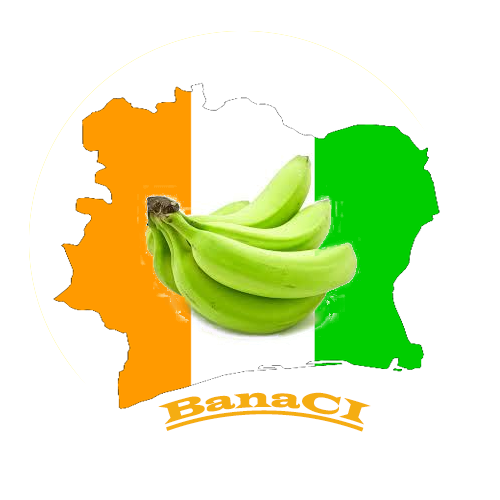
<style>
.page{position:relative;width:500px;height:500px;background:#ffffff}
.page>*{position:absolute;margin:0}
.t1{font:50px "LatinWide";color:#f5ad12;text-decoration:underline}
</style>
<div class="page">
<p class="t1" style="left:158px;top:392px;width:213px;height:40px">BanaCI</p>
</div>
